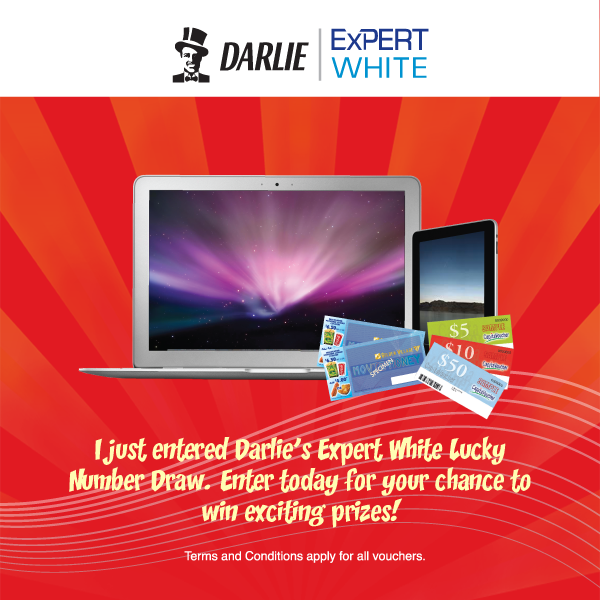
<style>
.page{position:relative;width:600px;height:600px;background:#e11a22}
.page>*{position:absolute;margin:0}
.t1{font:26px "CCZoinks";color:#fffdb3}
</style>
<div class="page">
<p class="t1" style="left:69px;top:436px;width:462px;height:92px;text-align:center">I just entered Darlie’s Expert White Lucky Number Draw. Enter today for your chance to win exciting prizes!</p>
</div>
